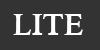
<style>
.page{position:relative;width:100px;height:50px;background:#333333}
.page>*{position:absolute;margin:0}
.t1{font:30px "IowanOldStyle-Bold";color:#ffffff}
</style>
<div class="page">
<p class="t1" style="left:13px;top:14px;width:70px;height:21px">LITE</p>
</div>
